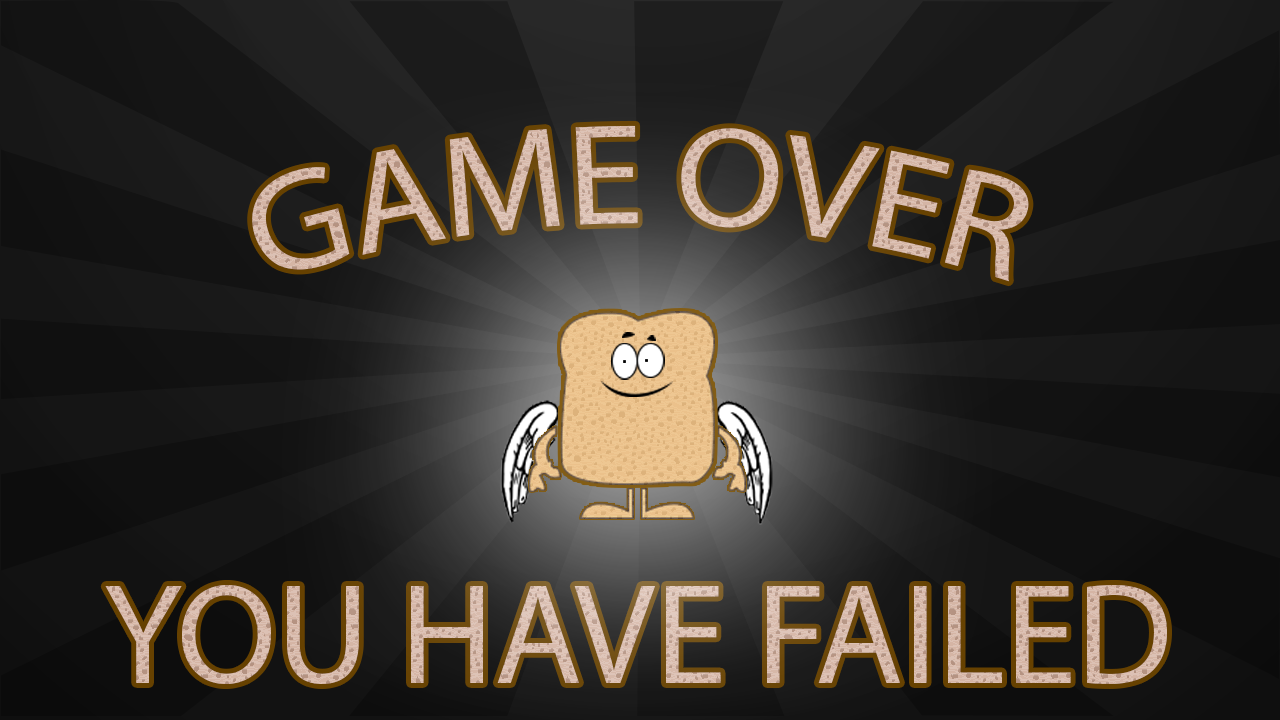
<style>
.page{position:relative;width:1280px;height:720px}
.page>*{position:absolute;margin:0}
.t1{font:144px "MyriadPro-Regular";color:#d7b8a9;text-transform:uppercase}
.t2{font:144px "MyriadPro-Regular";color:#d8baab;text-transform:uppercase}
</style>
<div class="page">
<p class="t1" style="left:252px;top:125px;width:777px;height:157px">Game Over</p>
<p class="t2" style="left:105px;top:584px;width:1062px;height:100px">You have failed</p>
</div>
